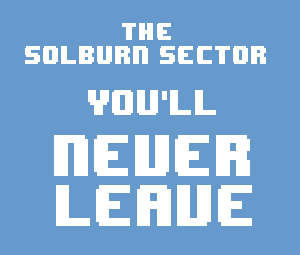
<style>
.page{position:relative;width:300px;height:255px;background:#6699cc}
.page>*{position:absolute;margin:0}
.t1{font:20.8px "8BITWONDERNominal";color:#ffffff;scale:0.83 1}
.t2{font:21.6px "8BITWONDERNominal";color:#ffffff;scale:0.83 1}
.t3{font:30.4px "8BITWONDERNominal";color:#ffffff;scale:0.83 1}
.t4{font:30.4px "04b19";color:#ffffff;scale:0.83 1}
.t5{font:49.2px "8BITWONDERNominal";color:#ffffff;scale:0.83 1}
.t6{font:49px "8BITWONDERNominal";color:#ffffff;scale:0.83 1}
</style>
<div class="page">
<p class="t1" style="left:122px;top:23px;width:49px;height:17px">THE</p>
<p class="t2" style="left:25px;top:46px;width:241px;height:18px">SOLBURN SECTOR</p>
<p class="t3" style="left:88px;top:90px;width:128px;height:25px">You<span class="t4">'</span>ll</p>
<p class="t5" style="left:54px;top:135px;width:196px;height:41px">Never</p>
<p class="t6" style="left:56px;top:185px;width:196px;height:41px">LEAVE</p>
</div>
